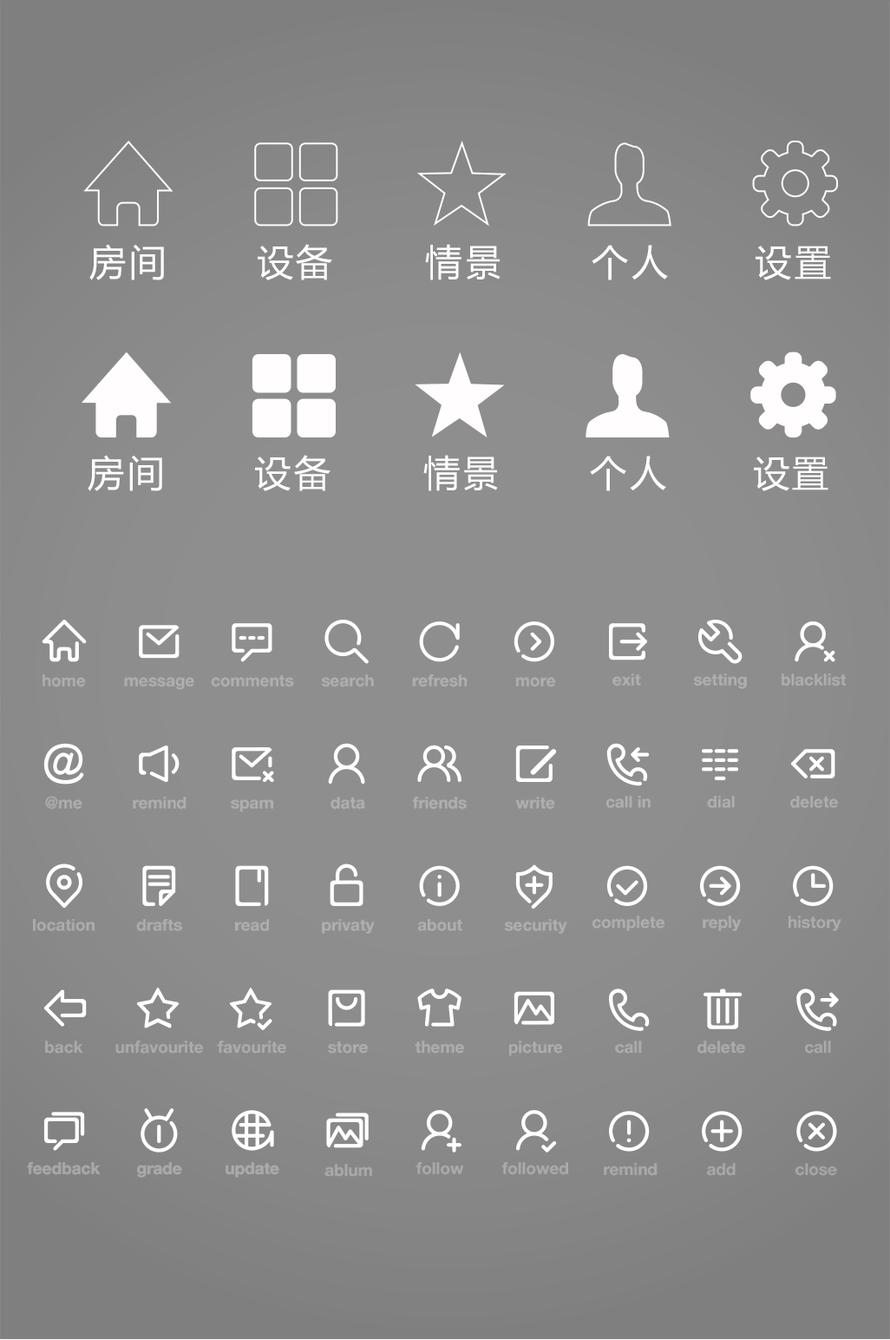
<style>
.page{position:relative;width:890px;height:1340px}
.page>*{position:absolute;margin:0}
.t1{font:36.6px "MicrosoftYaHei";letter-spacing:0.08em;color:#fffdfd}
.t2{font:16.4px "HelveticaNeue-Bold";color:#afafaf}
.t3{font:16.4px "HelveticaNeue-Bold";color:#b0b0b0}
.t4{font:16.4px "HelveticaNeue-Bold";color:#aeaeae}
.t5{font:16.4px "HelveticaNeue-Bold";color:#adadad}
.t6{font:16.4px "HelveticaNeue-Bold";color:#ababab}
.t7{font:16.4px "HelveticaNeue-Bold";color:#acacac}
.t8{font:16.4px "HelveticaNeue-Bold";color:#a7a7a7}
.t9{font:16.4px "HelveticaNeue-Bold";color:#a9a9a9}
</style>
<div class="page">
<p class="t1" style="left:89px;top:244px;width:75px;height:36px">房间</p>
<p class="t1" style="left:258px;top:244px;width:74px;height:36px">设备</p>
<p class="t1" style="left:425px;top:244px;width:76px;height:36px">情景</p>
<p class="t1" style="left:592px;top:245px;width:76px;height:35px">个人</p>
<p class="t1" style="left:756px;top:246px;width:75px;height:34px">设置</p>
<p class="t1" style="left:88px;top:455px;width:74px;height:36px">房间</p>
<p class="t1" style="left:255px;top:455px;width:76px;height:36px">设备</p>
<p class="t1" style="left:423px;top:455px;width:75px;height:36px">情景</p>
<p class="t1" style="left:590px;top:455px;width:76px;height:36px">个人</p>
<p class="t1" style="left:754px;top:456px;width:75px;height:35px">设置</p>
<p class="t2" style="left:43px;top:674px;width:42px;height:13px">home</p>
<p class="t3" style="left:124px;top:677px;width:70px;height:13px">message</p>
<p class="t3" style="left:211px;top:675px;width:83px;height:12px">comments</p>
<p class="t3" style="left:321px;top:674px;width:53px;height:13px">search</p>
<p class="t3" style="left:412px;top:674px;width:55px;height:13px">refresh</p>
<p class="t3" style="left:516px;top:677px;width:39px;height:10px">more</p>
<p class="t3" style="left:613px;top:673px;width:28px;height:13px">exit</p>
<p class="t3" style="left:694px;top:673px;width:53px;height:16px">setting</p>
<p class="t2" style="left:782px;top:673px;width:64px;height:13px">blacklist</p>
<p class="t4" style="left:45px;top:796px;width:37px;height:13px">@me</p>
<p class="t2" style="left:133px;top:796px;width:54px;height:13px">remind</p>
<p class="t3" style="left:331px;top:796px;width:34px;height:13px">data</p>
<p class="t3" style="left:412px;top:796px;width:55px;height:13px">friends</p>
<p class="t3" style="left:515px;top:796px;width:40px;height:13px">write</p>
<p class="t3" style="left:606px;top:796px;width:45px;height:12px">call in</p>
<p class="t2" style="left:707px;top:796px;width:28px;height:12px">dial</p>
<p class="t4" style="left:790px;top:796px;width:49px;height:12px">delete</p>
<p class="t3" style="left:231px;top:799px;width:42px;height:13px">spam</p>
<p class="t2" style="left:593px;top:915px;width:72px;height:16px">complete</p>
<p class="t2" style="left:703px;top:915px;width:38px;height:16px">reply</p>
<p class="t5" style="left:789px;top:915px;width:53px;height:16px">history</p>
<p class="t5" style="left:33px;top:919px;width:62px;height:12px">location</p>
<p class="t2" style="left:136px;top:919px;width:46px;height:12px">drafts</p>
<p class="t2" style="left:235px;top:919px;width:34px;height:12px">read</p>
<p class="t3" style="left:322px;top:919px;width:53px;height:15px">privaty</p>
<p class="t3" style="left:418px;top:919px;width:44px;height:12px">about</p>
<p class="t3" style="left:504px;top:919px;width:63px;height:15px">security</p>
<p class="t6" style="left:45px;top:1040px;width:38px;height:13px">back</p>
<p class="t7" style="left:115px;top:1040px;width:89px;height:13px">unfavourite</p>
<p class="t5" style="left:217px;top:1040px;width:69px;height:13px">favourite</p>
<p class="t4" style="left:328px;top:1041px;width:40px;height:12px">store</p>
<p class="t2" style="left:415px;top:1040px;width:49px;height:13px">theme</p>
<p class="t4" style="left:509px;top:1040px;width:53px;height:16px">picture</p>
<p class="t5" style="left:615px;top:1040px;width:27px;height:13px">call</p>
<p class="t5" style="left:698px;top:1040px;width:48px;height:13px">delete</p>
<p class="t6" style="left:805px;top:1040px;width:26px;height:13px">call</p>
<p class="t8" style="left:27px;top:1162px;width:74px;height:13px">feedback</p>
<p class="t8" style="left:27px;top:1162px;width:74px;height:13px">feedback</p>
<p class="t9" style="left:137px;top:1162px;width:45px;height:15px">grade</p>
<p class="t9" style="left:137px;top:1162px;width:45px;height:15px">grade</p>
<p class="t6" style="left:226px;top:1162px;width:53px;height:15px">update</p>
<p class="t6" style="left:226px;top:1162px;width:53px;height:15px">update</p>
<p class="t6" style="left:324px;top:1163px;width:48px;height:13px">ablum</p>
<p class="t6" style="left:416px;top:1162px;width:48px;height:13px">follow</p>
<p class="t6" style="left:501px;top:1162px;width:67px;height:13px">followed</p>
<p class="t6" style="left:604px;top:1163px;width:54px;height:13px">remind</p>
<p class="t9" style="left:706px;top:1163px;width:30px;height:13px">add</p>
<p class="t8" style="left:796px;top:1163px;width:41px;height:13px">close</p>
</div>
